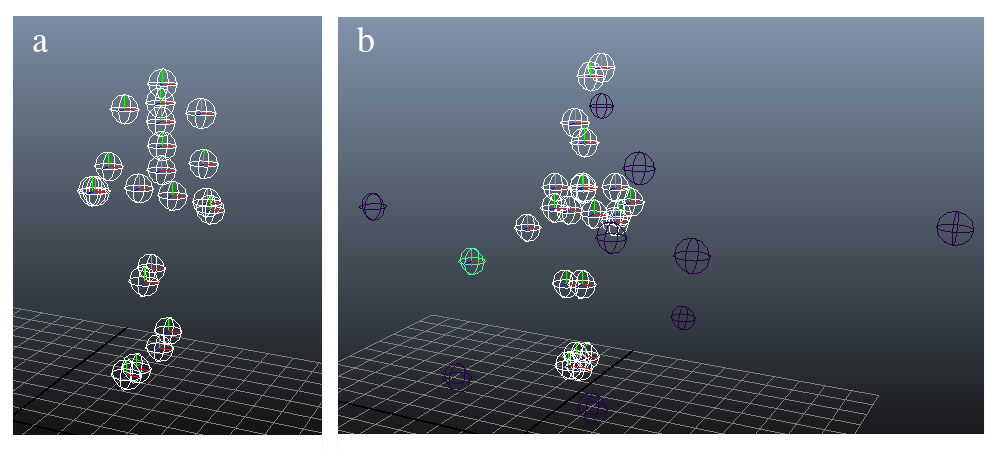
<style>
.page{position:relative;width:1000px;height:452px}
.page>*{position:absolute;margin:0}
.t1{font:36px "Times-Roman";color:#ffffff}
</style>
<div class="page">
<p class="t1" style="left:357px;top:27px;width:17px;height:25px">b</p>
<p class="t1" style="left:33px;top:35px;width:15px;height:17px">a</p>
</div>
